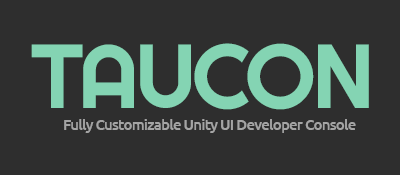
<style>
.page{position:relative;width:400px;height:175px;background:#2e2e2e}
.page>*{position:absolute;margin:0}
.t1{font:90.7px "Righteous-Regular";letter-spacing:-0.04em;color:#84d4b3}
.t2{font:14.7px "Ubuntu-Medium";letter-spacing:-0.04em;color:#a4a4a4}
</style>
<div class="page">
<p class="t1" style="left:31px;top:43px;width:338px;height:67px">TAUCON</p>
<p class="t2" style="left:64px;top:119px;width:292px;height:14px">Fully Customizable Unity UI Developer Console</p>
</div>
